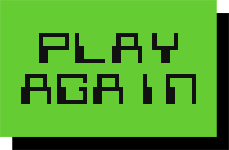
<style>
.page{position:relative;width:229px;height:150px;background:#66cc33}
.page>*{position:absolute;margin:0}
.t1{font:34.3px "G7-Silkworm-TTF";color:#111111}
</style>
<div class="page">
<p class="t1" style="left:21px;top:33px;width:175px;height:71px;text-align:center">PLAY<br>AGAIN</p>
</div>
